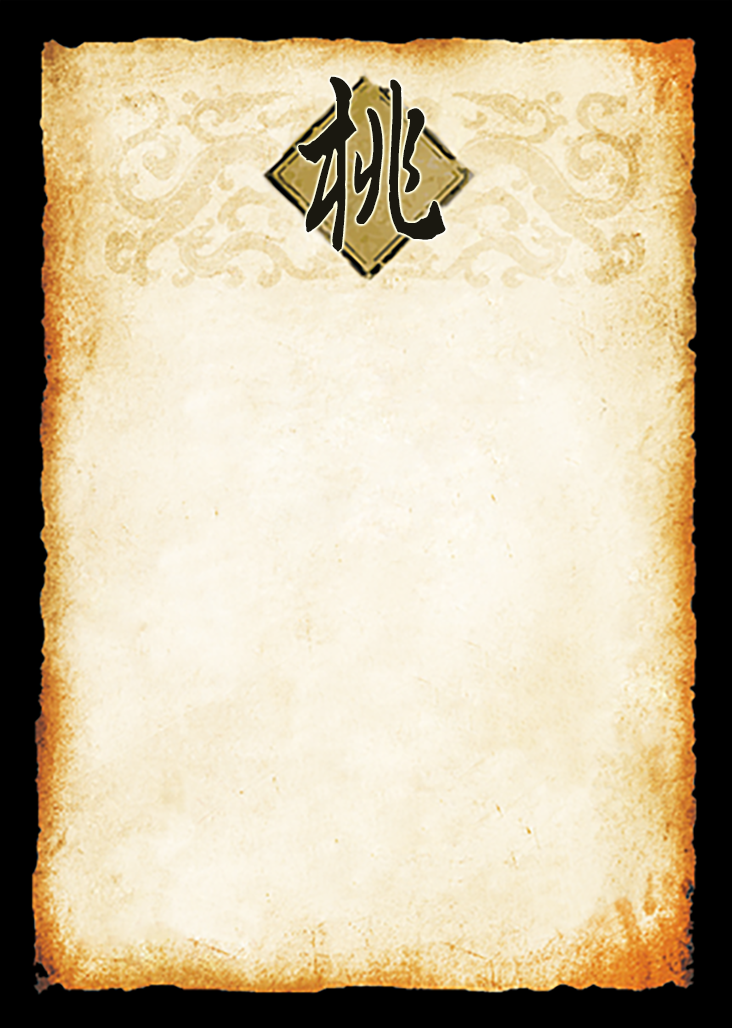
<style>
.page{position:relative;width:732px;height:1028px}
.page>*{position:absolute;margin:0}
.t1{font:183.3px "JMMCX_GBK";color:#1b1911;font-weight:bold}
</style>
<div class="page">
<p class="t1" style="left:298px;top:76px;width:148px;height:176px">桃</p>
</div>
